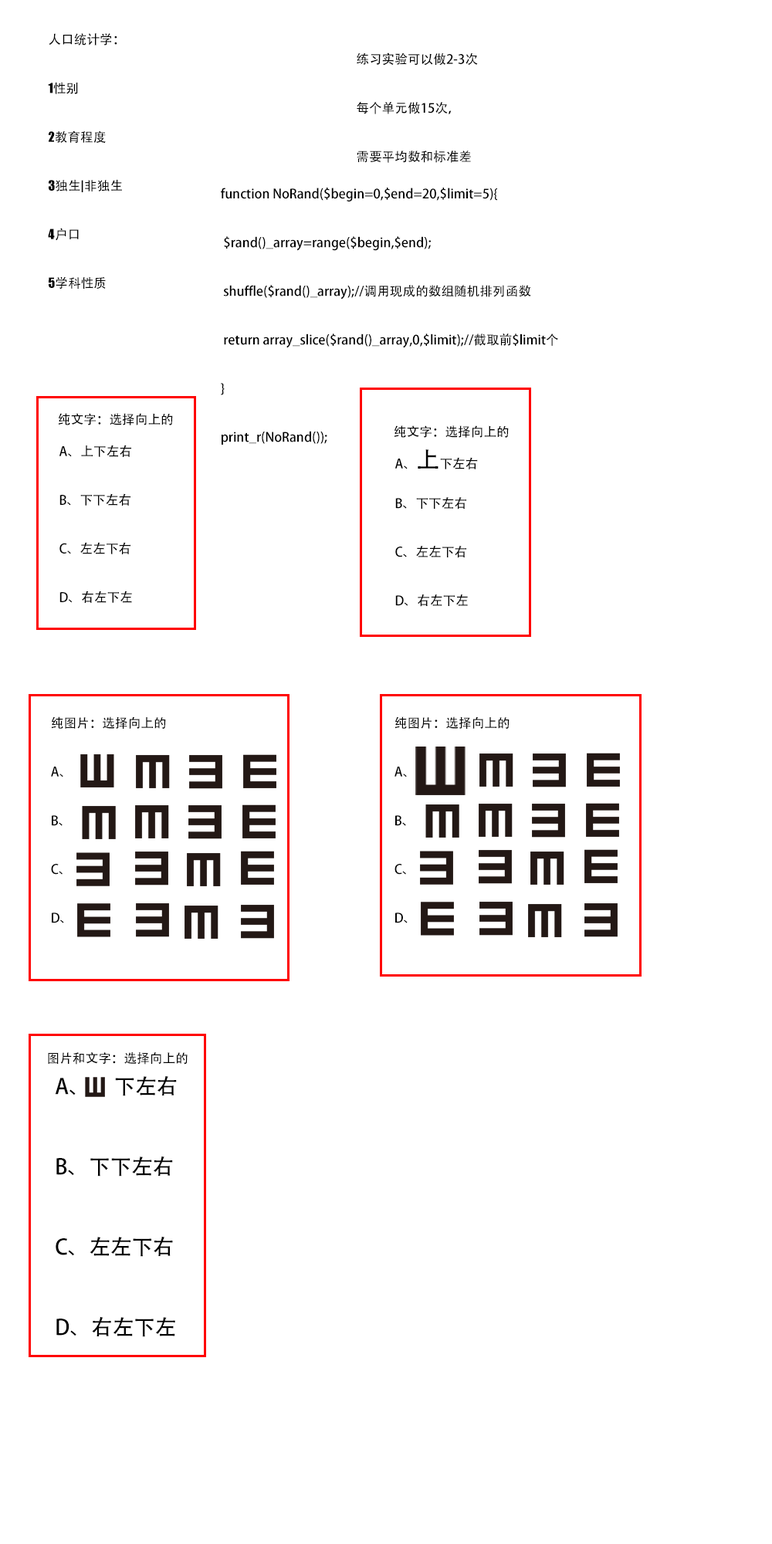
<style>
.page{position:relative;width:772px;height:1544px;background:#ffffff}
.page>*{position:absolute;margin:0}
.t1{font:12.9px/48.7px "AdobeHeitiStd-Regular";color:#000000}
.t2{font:12.9px/48.7px "Impact";color:#000000}
.t3{font:12.9px "AdobeHeitiStd-Regular";color:#000000}
.t4{font:23.2px/48.7px "AdobeHeitiStd-Regular";color:#000000}
.t5{font:21.2px/80.3px "AdobeHeitiStd-Regular";color:#000000}
</style>
<div class="page">
<p class="t1" style="left:48px;top:33px;width:74px;height:257px">人口统计学：<span class="t2"><br>1</span>性别<span class="t2"><br>2</span>教育程度<span class="t2"><br>3</span>独生<span class="t2">|</span>非独生<span class="t2"><br>4</span>户口<span class="t2"><br>5</span>学科性质</p>
<p class="t1" style="left:357px;top:53px;width:121px;height:110px">练习实验可以做2-3次<br>每个单元做15次，<br>需要平均数和标准差</p>
<p class="t1" style="left:221px;top:188px;width:337px;height:257px">function NoRand($begin=0,$end=20,$limit=5){<br> $rand()_array=range($begin,$end);<br> shuffle($rand()_array);//调用现成的数组随机排列函数<br> return array_slice($rand()_array,0,$limit);//截取前$limit个<br>}<br>print_r(NoRand());</p>
<p class="t3" style="left:58px;top:413px;width:115px;height:12px">纯文字：选择向上的</p>
<p class="t3" style="left:394px;top:425px;width:115px;height:13px">纯文字：选择向上的</p>
<p class="t1" style="left:59px;top:445px;width:73px;height:158px">A、上下左右<br>B、下下左右<br>C、左左下右<br>D、右左下左</p>
<p class="t1" style="left:395px;top:449px;width:83px;height:158px">A、<span class="t4">上</span>下左右<br>B、下下左右<br>C、左左下右<br>D、右左下左</p>
<p class="t3" style="left:48px;top:1052px;width:140px;height:13px">图片和文字：选择向上的</p>
<p class="t5" style="left:55px;top:1076px;width:122px;height:261px">A、     下左右<br>B、下下左右<br>C、左左下右<br>D、右左下左</p>
</div>
